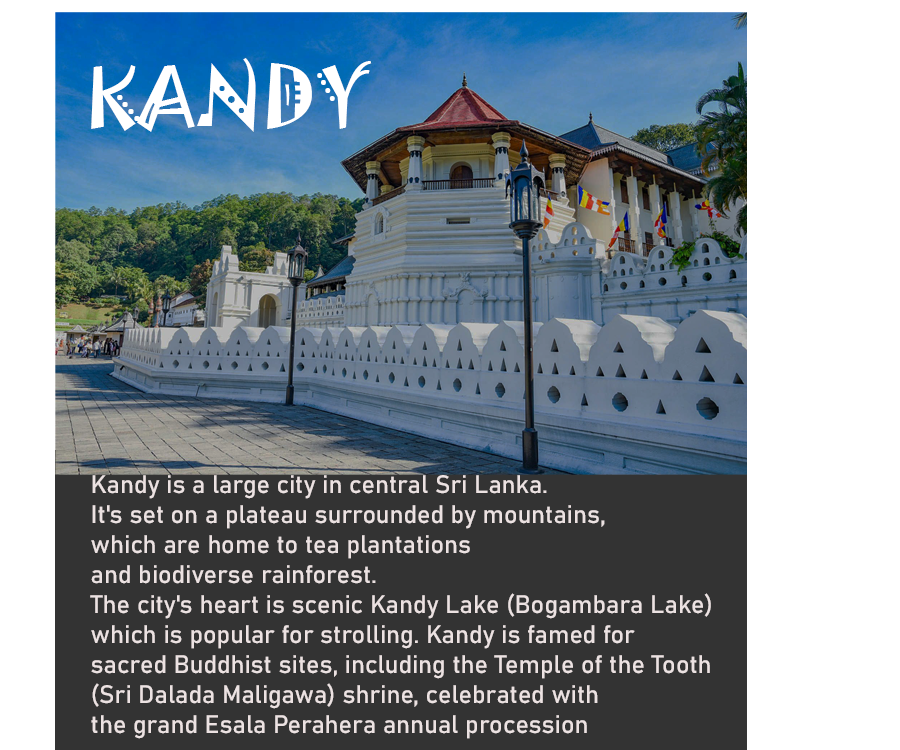
<style>
.page{position:relative;width:900px;height:750px;background:#ffffff}
.page>*{position:absolute;margin:0}
.t1{font:75px "Jokerman-Regular";color:#ffffff}
.t2{font:25px "Bahnschrift";color:#ece2e2}
</style>
<div class="page">
<p class="t1" style="left:91px;top:58px;width:281px;height:74px">KANDY</p>
<p class="t2" style="left:90px;top:475px;width:621px;height:264px">Kandy is a large city in central Sri Lanka. <br>It's set on a plateau surrounded by mountains, <br>which are home to tea plantations <br>and biodiverse rainforest. <br>The city's heart is scenic Kandy Lake (Bogambara Lake) <br>which is popular for strolling. Kandy is famed for <br>sacred Buddhist sites, including the Temple of the Tooth <br>(Sri Dalada Maligawa) shrine, celebrated with <br>the grand Esala Perahera annual procession</p>
</div>
